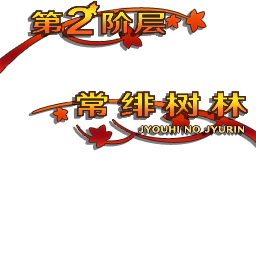
<style>
.page{position:relative;width:256px;height:256px;background:#ffffff}
.page>*{position:absolute;margin:0}
.t1{font:24.1px "HYWenHei-HEW";letter-spacing:0.051em;scale:1.35 1}
.t2{font:36.8px "HYWenHei-HEW";letter-spacing:0.052em;scale:1.33 1}
.t3{font:27.1px "HYWenHei-HEW";letter-spacing:0.271em;scale:1.33 1}
</style>
<div class="page">
<p class="t1" style="left:31px;top:11px;width:134px;height:23px">第   阶层</p>
<p class="t2" style="left:66px;top:7px;width:27px;height:28px">2</p>
<p class="t3" style="left:76px;top:92px;width:171px;height:25px">常绯树林</p>
</div>
